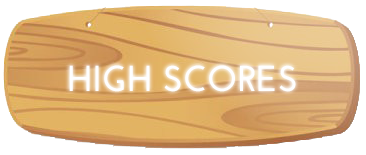
<style>
.page{position:relative;width:366px;height:155px}
.page>*{position:absolute;margin:0}
.t1{font:36px "JosefinSans-Bold";color:#fefefe}
</style>
<div class="page">
<p class="t1" style="left:69px;top:65px;width:227px;height:27px">HIGH SCORES</p>
</div>
